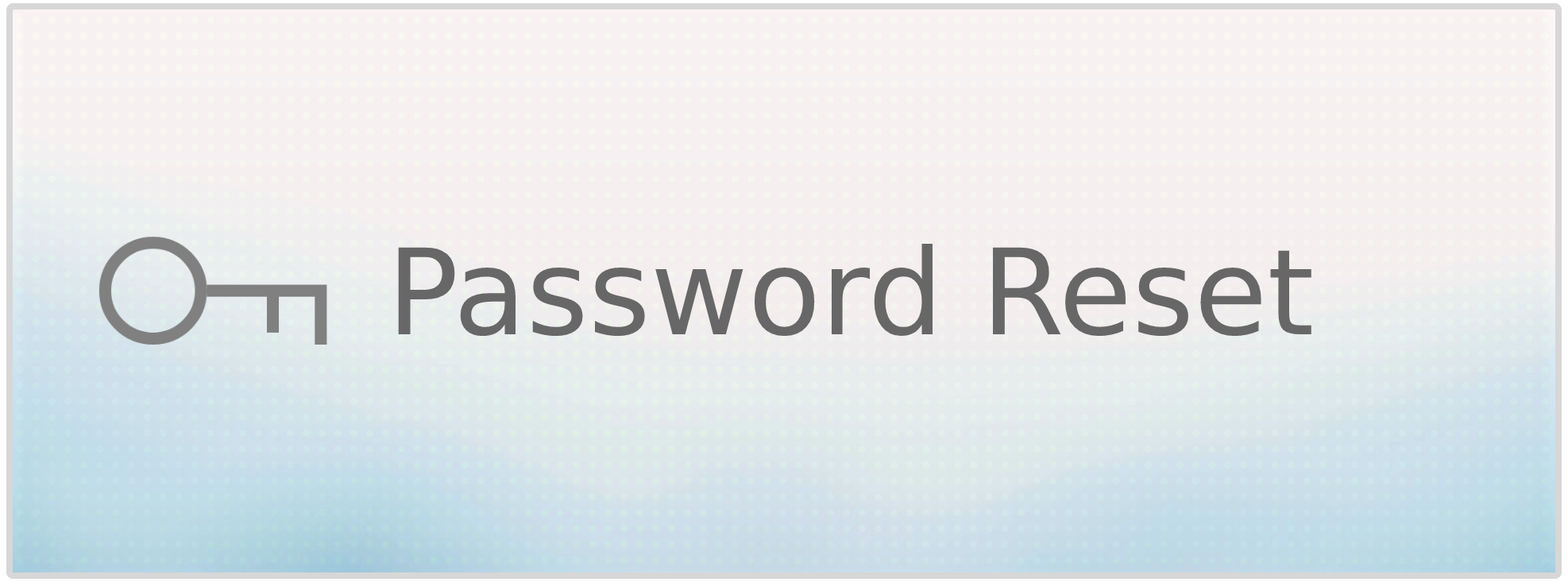
<style>
.page{position:relative;width:1568px;height:582px}
.page>*{position:absolute;margin:0}
.t1{font:119.1px "DejaVuSans";color:#676767}
</style>
<div class="page">
<p class="t1" style="left:398px;top:244px;width:913px;height:93px">Password Reset</p>
</div>
